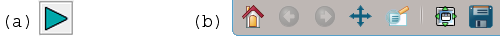
<style>
.page{position:relative;width:500px;height:50px;background:#ffffff}
.page>*{position:absolute;margin:0}
.t1{font:18.7px "Courier";color:#000000}
</style>
<div class="page">
<p class="t1" style="left:6px;top:15px;width:213px;height:14px">(a)              (b)</p>
</div>
